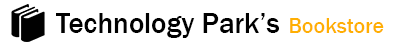
<style>
.page{position:relative;width:395px;height:47px;background:#ffffff}
.page>*{position:absolute;margin:0}
.t1{font:29px "FranklinGothic-Medium";color:#000000}
.t2{font:22px "FranklinGothic-Medium";color:#ffaf02}
</style>
<div class="page">
<p class="t1" style="left:56px;top:13px;width:328px;height:25px">Technology Park’s <span class="t2">Bookstore</span></p>
</div>
